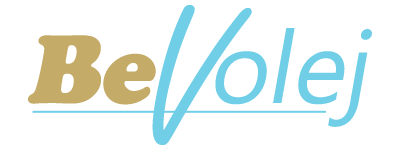
<style>
.page{position:relative;width:400px;height:157px;background:#ffffff}
.page>*{position:absolute;margin:0}
.t1{font:201.3px "FreestyleScript-Regular";color:#71cee7}
.t2{font:100.6px "Ebrima";color:#71cee7;font-style:italic}
.t3{font:100.6px "CooperBlack";color:#c4ab68;font-style:italic}
</style>
<div class="page">
<p class="t1" style="left:152px;top:4px;width:100px;height:141px">V</p>
<p class="t2" style="left:28px;top:28px;width:344px;height:99px"><span class="t3">Be  </span>olej</p>
</div>
